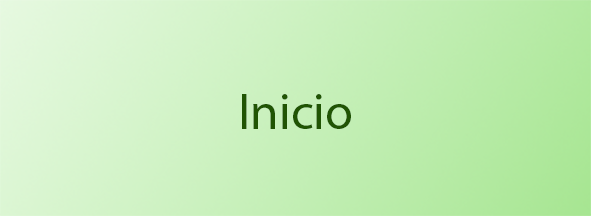
<style>
.page{position:relative;width:591px;height:216px}
.page>*{position:absolute;margin:0}
.t1{font:51.1px "MyriadPro-Regular";color:#205403}
</style>
<div class="page">
<p class="t1" style="left:242px;top:94px;width:109px;height:35px">Inicio</p>
</div>
